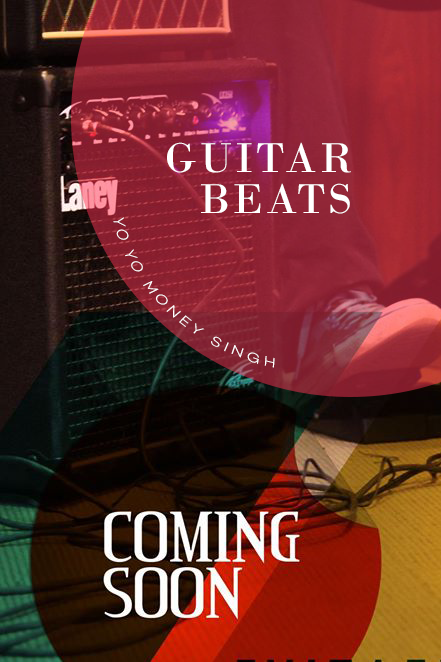
<style>
.page{position:relative;width:441px;height:662px}
.page>*{position:absolute;margin:0}
.t1{font:44px/40.7px "BodoniMT";letter-spacing:0.06em;color:#ffffff;text-transform:uppercase}
.t2{font:16.4px "Campton-LightDEMO";letter-spacing:0.22em;color:#ffffff;text-transform:uppercase;scale:0.89 1}
</style>
<div class="page">
<p class="t1" style="left:167px;top:142px;width:184px;height:72px;text-align:right">GUitar<br> Beats</p>
<p class="t2" style="left:113px;top:217px;width:162px;height:151px;rotate:-99deg">Yo Yo Money Singh</p>
</div>
